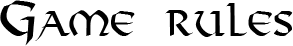
<style>
.page{position:relative;width:293px;height:46px;background:#ffffff}
.page>*{position:absolute;margin:0}
.t1{font:48px "Viking-Medium";color:#000000;font-variant:small-caps;scale:0.9 1}
</style>
<div class="page">
<p class="t1" style="left:0px;top:0px;width:293px;height:46px">Game rules</p>
</div>
